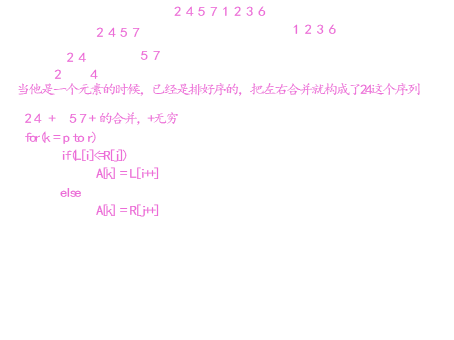
<style>
.page{position:relative;width:454px;height:340px;background:#ffffff}
.page>*{position:absolute;margin:0}
.t1{font:13.3px "¿¬Ìå";letter-spacing:-0.1em;color:#ec6cd8;scale:1.12 1}
.t2{font:13.3px "¿¬Ìå";letter-spacing:-0.18em;color:#ec6cd8;scale:1.12 1}
.t3{font:13.3px/14px "¿¬Ìå";letter-spacing:-0.18em;color:#ec6cd8;scale:1.12 1}
</style>
<div class="page">
<p class="t1" style="left:174px;top:6px;width:92px;height:10px">2 4 5 7 1 2 3 6</p>
<p class="t1" style="left:96px;top:27px;width:44px;height:10px">2 4 5 7</p>
<p class="t1" style="left:293px;top:24px;width:43px;height:10px">1 2 3 6</p>
<p class="t1" style="left:67px;top:52px;width:19px;height:10px">2 4</p>
<p class="t1" style="left:140px;top:51px;width:20px;height:9px">5 7</p>
<p class="t1" style="left:54px;top:69px;width:44px;height:10px">2     4</p>
<p class="t2" style="left:18px;top:83px;width:402px;height:13px">当他是一个元素的时候，已经是排好序的，把左右合并就构成了24这个序列</p>
<p class="t3" style="left:25px;top:112px;width:153px;height:105px">2 4  +   5 7 + 的合并，+无穷<br>for(k = p to r)<br> if(L[i]&lt;=R[j])<br>  A[k] = L[i++]<br> else<br>  A[k] = R[j++]</p>
</div>
